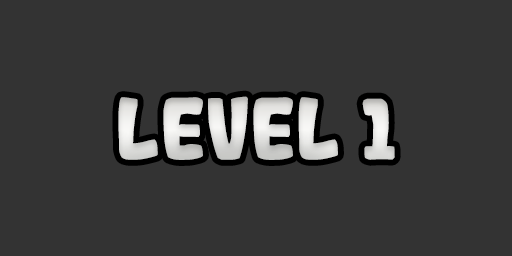
<style>
.page{position:relative;width:512px;height:256px;background:#333333}
.page>*{position:absolute;margin:0}
.t1{font:83.3px "Gogono-Cocoa-Mochi";color:#dedddb}
</style>
<div class="page">
<p class="t1" style="left:118px;top:96px;width:277px;height:64px">LEVEL 1</p>
</div>
